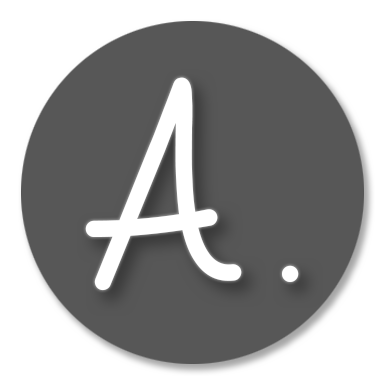
<style>
.page{position:relative;width:384px;height:384px;background:#575757}
.page>*{position:absolute;margin:0}
.t1{font:300px "AlwaysInMyHeart";letter-spacing:0.04em;color:#ffffff}
</style>
<div class="page">
<p class="t1" style="left:85px;top:77px;width:214px;height:214px">A.</p>
</div>
